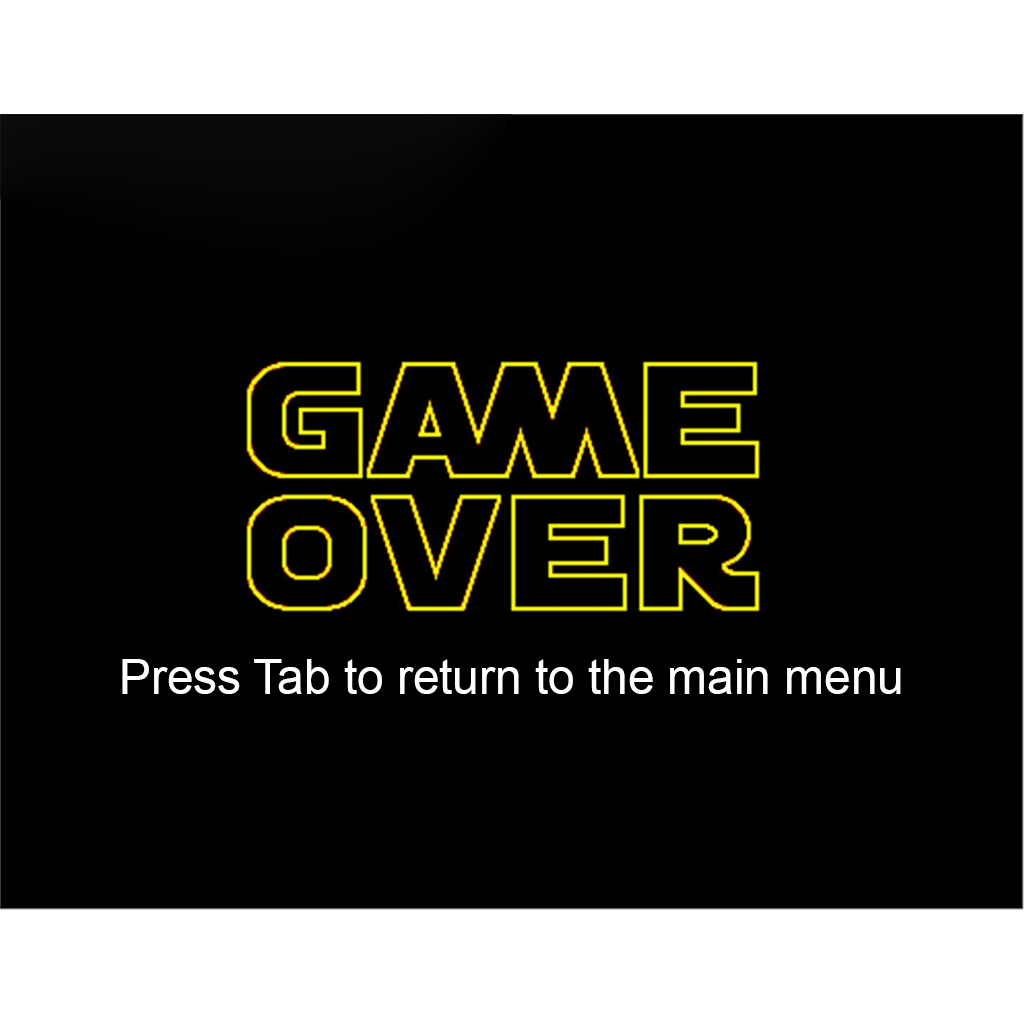
<style>
.page{position:relative;width:1024px;height:1024px;background:#000000}
.page>*{position:absolute;margin:0}
.t1{font:47.8px "ArialMT";color:#ffffff}
</style>
<div class="page">
<p class="t1" style="left:122px;top:659px;width:779px;height:35px">Press Tab to return to the main menu</p>
</div>
